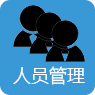
<style>
.page{position:relative;width:95px;height:95px;background:#3998d6}
.page>*{position:absolute;margin:0}
.t1{font:18px "MicrosoftYaHei";color:#ffffff}
</style>
<div class="page">
<p class="t1" style="left:13px;top:66px;width:72px;height:19px">人员管理</p>
</div>
